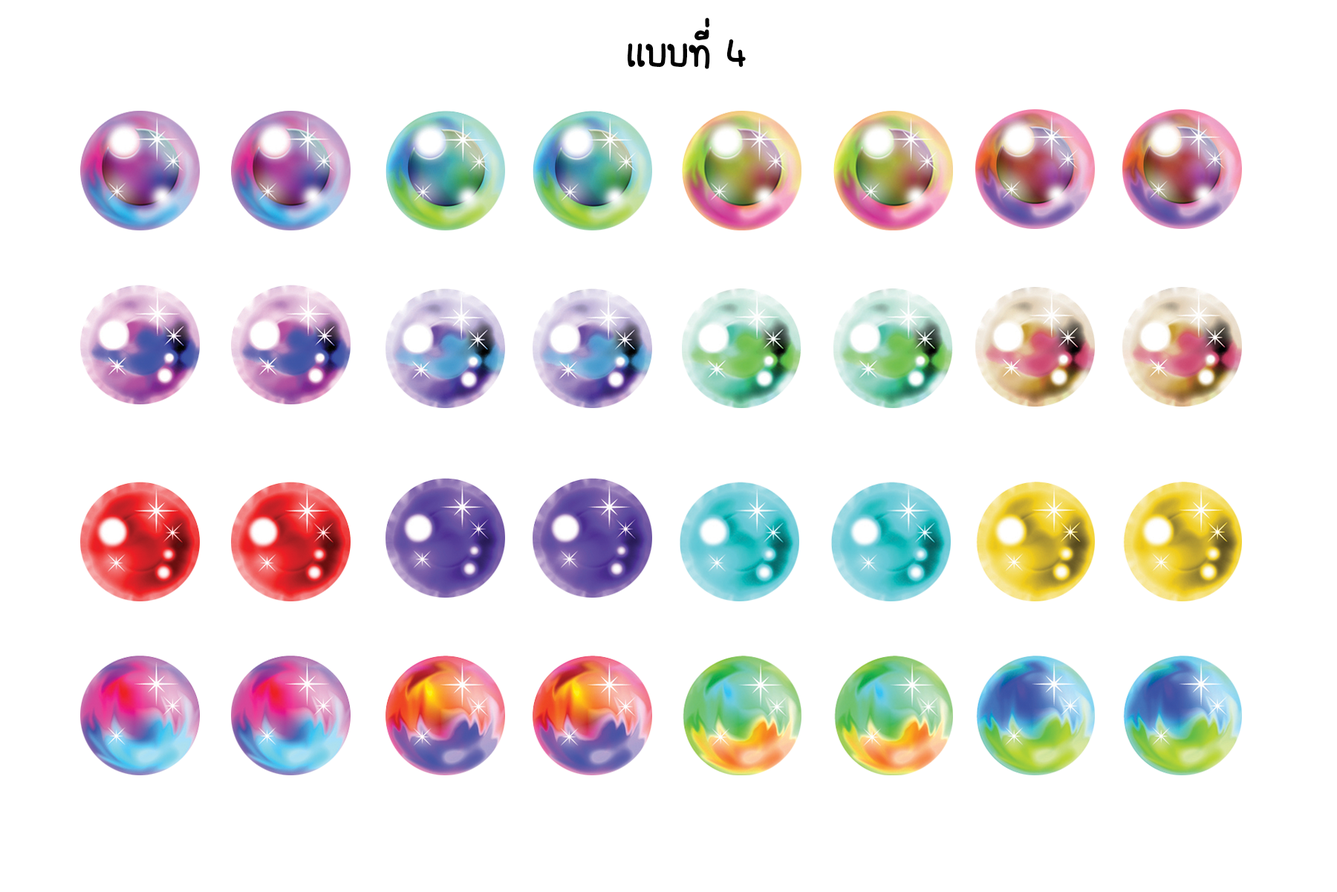
<style>
.page{position:relative;width:1337px;height:892px;background:#ffffff}
.page>*{position:absolute;margin:0}
.t1{font:55.7px "FCDaisyRegular";color:#000000}
</style>
<div class="page">
<p class="t1" style="left:627px;top:18px;width:119px;height:51px">เเบบที่ 4</p>
</div>
